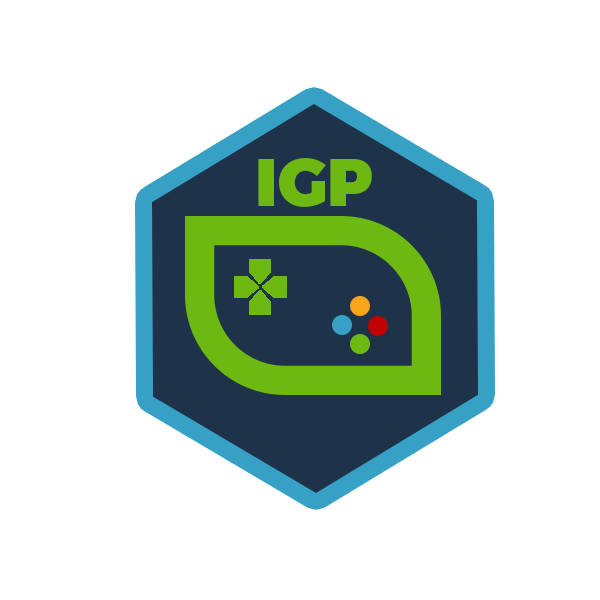
<style>
.page{position:relative;width:600px;height:600px;background:#ffffff}
.page>*{position:absolute;margin:0}
.t1{font:66.7px "Montserrat-Black";color:#6db911}
</style>
<div class="page">
<p class="t1" style="left:258px;top:158px;width:114px;height:49px">IGP</p>
</div>
